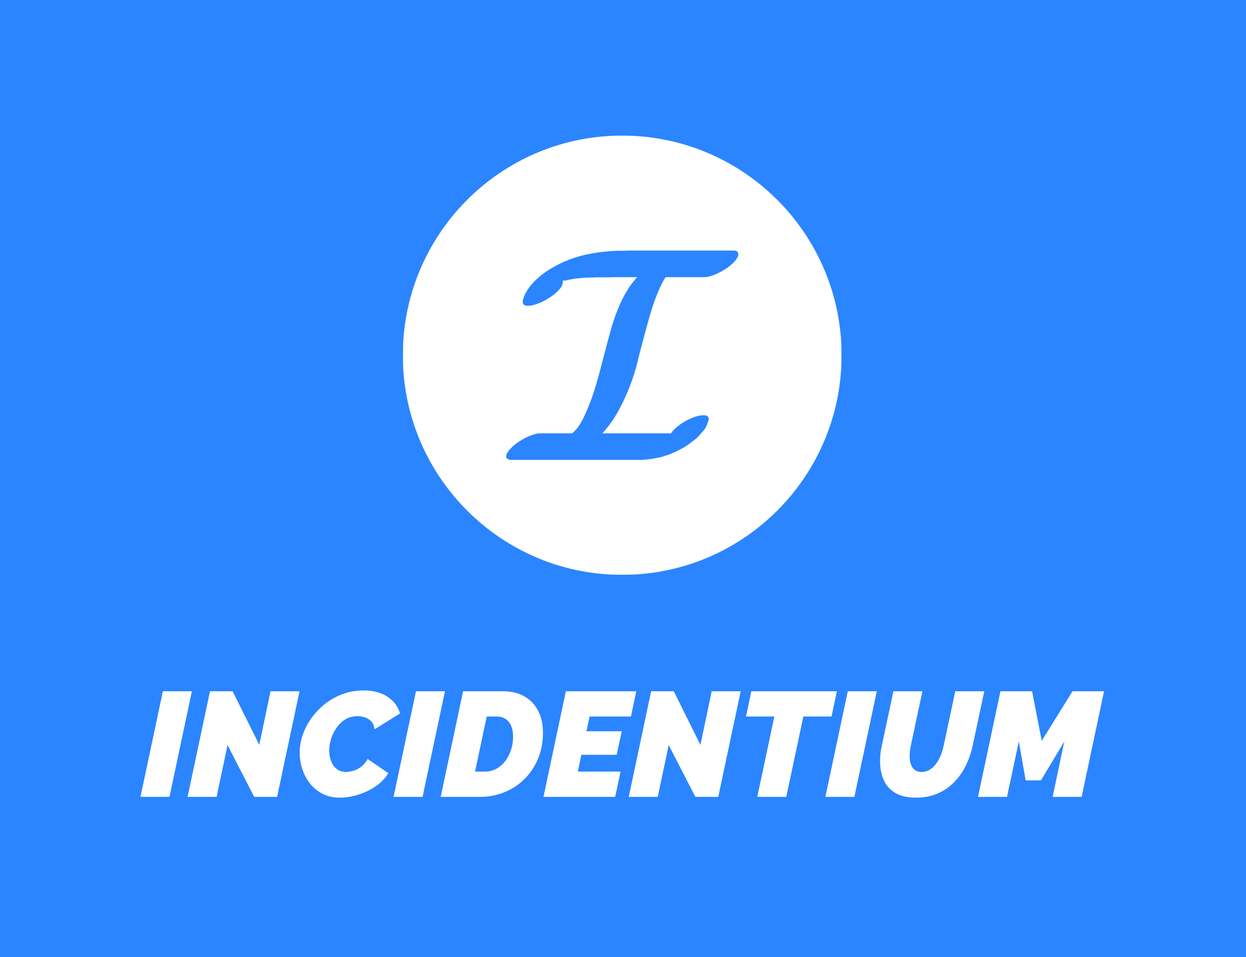
<style>
.page{position:relative;width:1246px;height:957px;background:#2b85ff}
.page>*{position:absolute;margin:0}
.t1{font:148.5px "Raleway-BlackItalic";color:#ffffff;text-transform:uppercase}
</style>
<div class="page">
<p class="t1" style="left:140px;top:690px;width:965px;height:107px">Incidentium</p>
</div>
